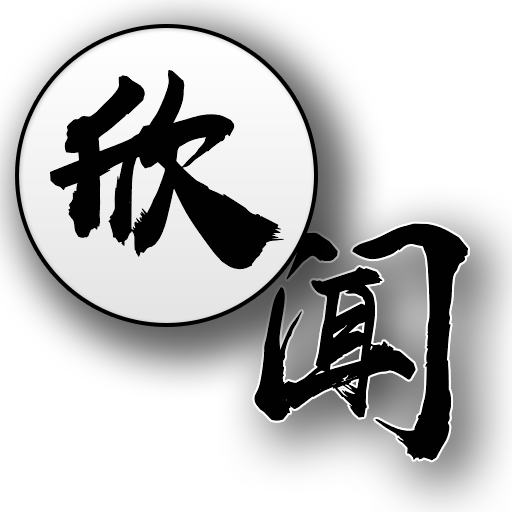
<style>
.page{position:relative;width:512px;height:512px;background:#ffffff}
.page>*{position:absolute;margin:0}
.t1{font:232px "HYShangWeiShouShuW-Regular";letter-spacing:0.01em;color:#010102}
.t2{font:250px "HYShangWeiShouShuW-Regular";letter-spacing:0.01em;color:#010102}
</style>
<div class="page">
<p class="t1" style="left:50px;top:70px;width:234px;height:200px">欣</p>
<p class="t2" style="left:254px;top:223px;width:214px;height:238px">闻</p>
</div>
